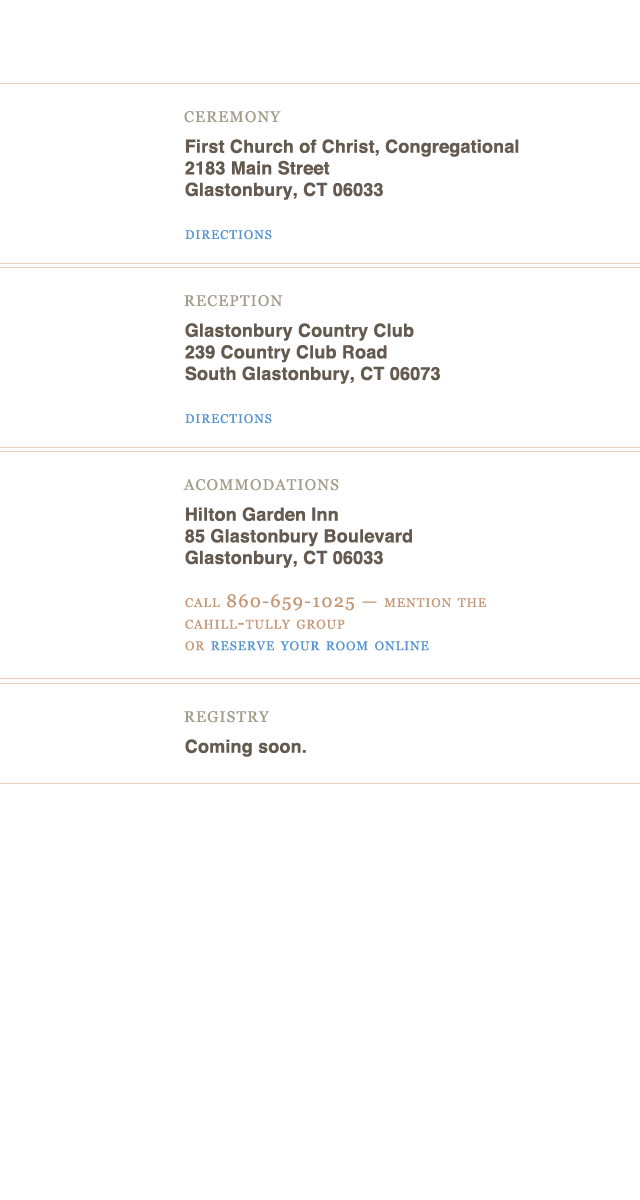
<style>
.page{position:relative;width:640px;height:1200px;background:#ffffff}
.page>*{position:absolute;margin:0}
.t1{font:22px "Georgia";letter-spacing:0.075em;color:#a39d8b;font-variant:small-caps}
.t2{font:18px "Helvetica-Bold";letter-spacing:0.01em;color:#645a4f}
.t3{font:18px "Georgia";letter-spacing:0.075em;color:#5494d0;font-variant:small-caps}
.t4{font:18px "Georgia";letter-spacing:0.075em;color:#c69675;font-variant:small-caps}
</style>
<div class="page">
<p class="t1" style="left:184px;top:111px;width:97px;height:12px">ceremony</p>
<p class="t2" style="left:185px;top:139px;width:334px;height:61px">First Church of Christ, Congregational<br>2183 Main Street<br>Glastonbury, CT 06033</p>
<p class="t3" style="left:185px;top:230px;width:87px;height:10px">directions</p>
<p class="t1" style="left:184px;top:295px;width:99px;height:12px">reception</p>
<p class="t2" style="left:185px;top:323px;width:255px;height:61px">Glastonbury Country Club<br>239 Country Club Road<br>South Glastonbury, CT 06073</p>
<p class="t3" style="left:185px;top:414px;width:87px;height:10px">directions</p>
<p class="t1" style="left:183px;top:479px;width:156px;height:12px">acommodations</p>
<p class="t2" style="left:185px;top:507px;width:227px;height:61px">Hilton Garden Inn<br>85 Glastonbury Boulevard<br>Glastonbury, CT 06033</p>
<p class="t4" style="left:185px;top:594px;width:301px;height:57px">call 860-659-1025 — mention the<br>cahill-tully group<br>or <span class="t3">reserve your room online</span></p>
<p class="t1" style="left:184px;top:711px;width:85px;height:12px">registry</p>
<p class="t2" style="left:185px;top:739px;width:121px;height:18px">Coming soon.</p>
</div>
